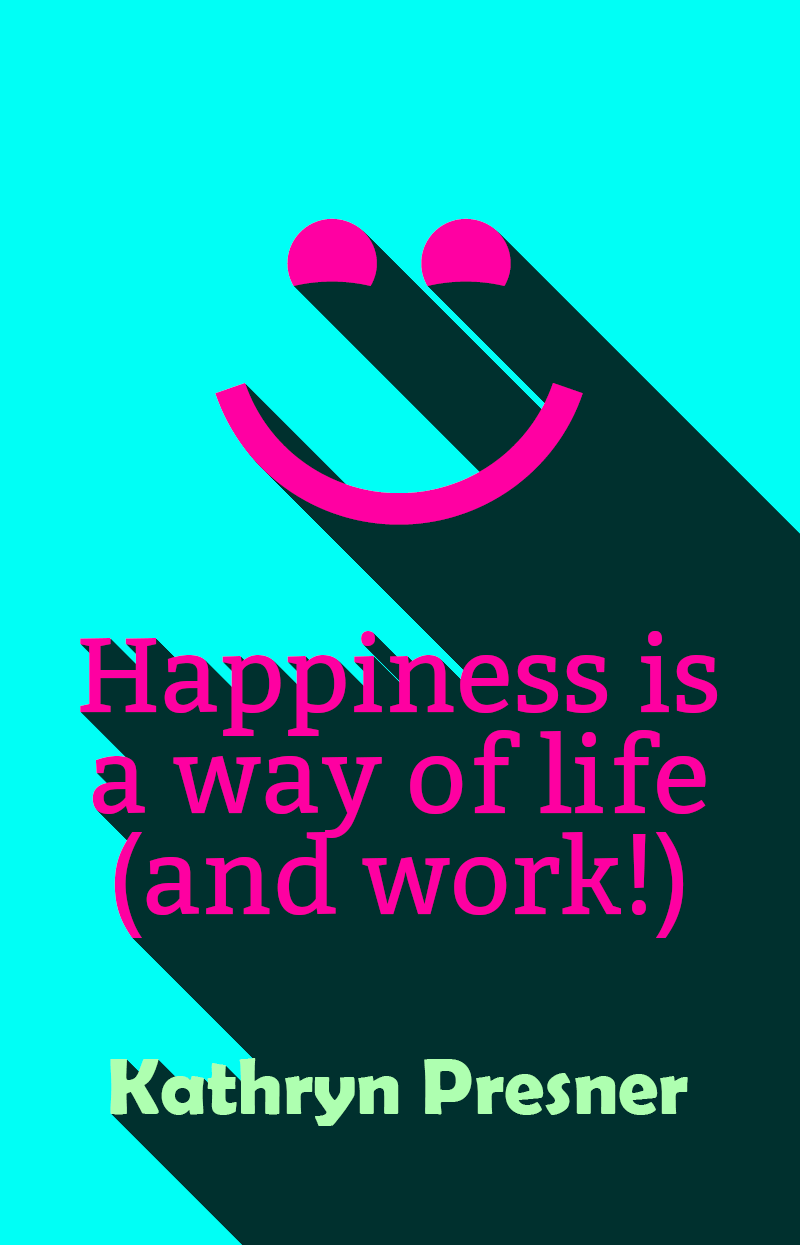
<style>
.page{position:relative;width:800px;height:1245px;background:#00fff6}
.page>*{position:absolute;margin:0}
.t1{font:106px/101px "Bitter-Regular";color:#fe00a1}
.t2{font:80px "BerlinSansFBDemi-Bold";color:#aeffb0}
</style>
<div class="page">
<p class="t1" style="left:80px;top:631px;width:638px;height:307px;text-align:center">Happiness is a way of life (and work!)</p>
<p class="t2" style="left:110px;top:1058px;width:578px;height:68px">Kathryn Presner</p>
</div>
